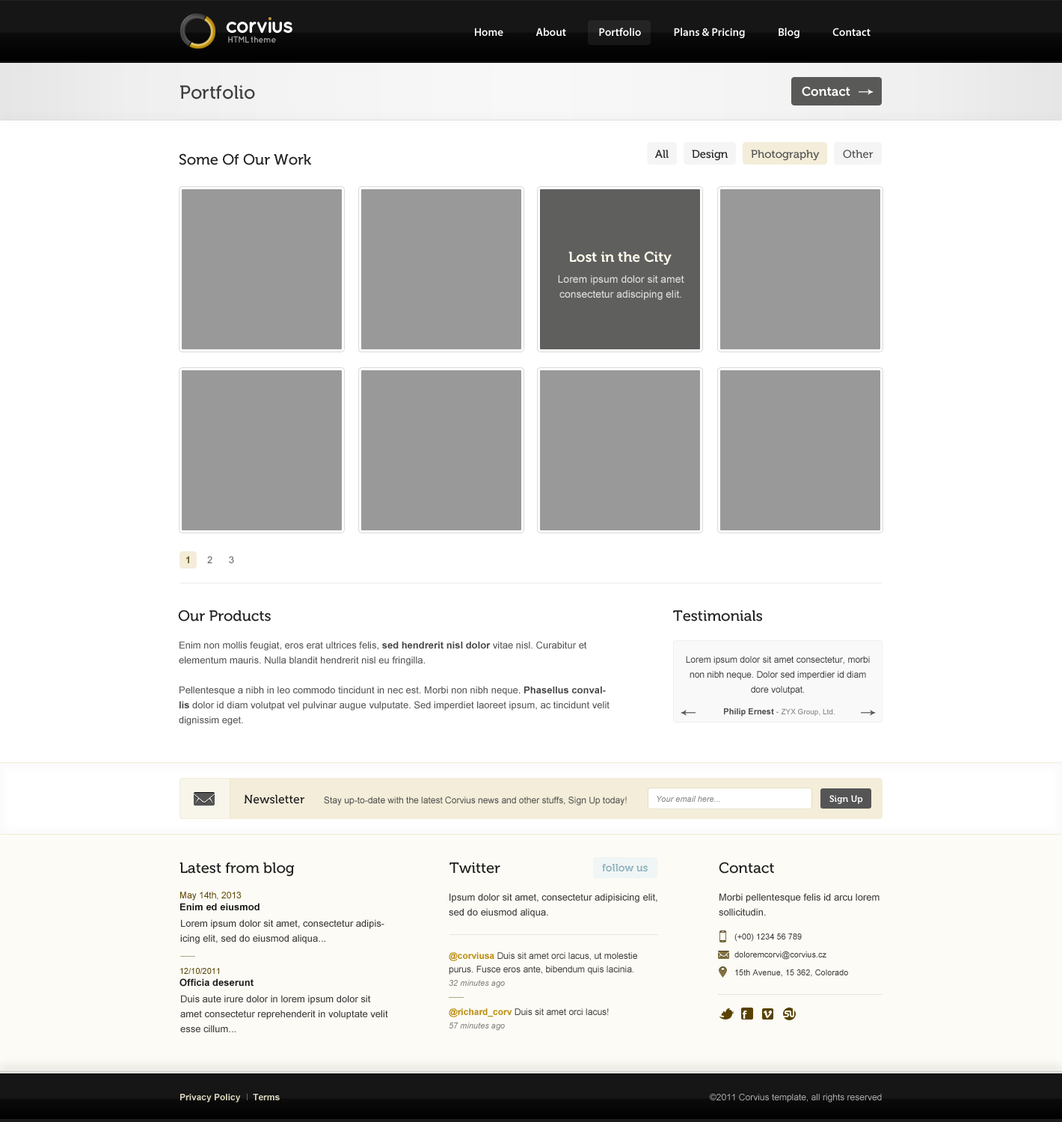
<style>
.page{position:relative;width:1062px;height:1122px;background:#ffffff}
.page>*{position:absolute;margin:0}
.t1{font:11.2px "MyriadPro-Semibold";color:#fefefe}
.t2{font:9px "QuicksandBold-Regular";letter-spacing:-0.07em;color:#a0a0a0}
.t3{font:9px "QuicksandBold-Regular";letter-spacing:-0.1em;color:#a0a0a0;text-transform:uppercase}
.t4{font:18.7px "Museo-500";color:#3f3f3f}
.t5{font:12.7px "Museo-700";color:#ffffff}
.t6{font:11.2px "Museo-500";color:#202020}
.t7{font:11.2px "Museo-500";color:#505050}
.t8{font:15px "Museo-500";color:#202020}
.t9{font:14.2px "Museo-700";color:#fffbec}
.t10{font:10.5px/15px "ArialMT";color:#dfdfdf}
.t11{font:9.7px "ArialMT";color:#686868}
.t12{font:9.7px "Arial-BoldMT";color:#6b5a22}
.t13{font:9.7px/15px "ArialMT";color:#575757}
.t14{font:9.7px/15px "Arial-BoldMT";color:#444444}
.t15{font:9px/15px "ArialMT";color:#414141}
.t16{font:7.5px "ArialMT";color:#878787}
.t17{font:8.2px "Arial-BoldMT";color:#494949}
.t18{font:8.2px "ArialMT";color:#878787}
.t19{font:12px "Museo-500";color:#181818}
.t20{font:9px "ArialMT";color:#4c4c4c}
.t21{font:8.2px "Arial-ItalicMT";color:#868585}
.t22{font:9px "Museo-700";color:#ffffff}
.t23{font:10.5px "Museo-700";color:#99c3ce}
.t24{font:9.7px/12px "Arial-BoldMT";color:#181818}
.t25{font:9px/12px "ArialMT";color:#594200}
.t26{font:9.7px/15px "ArialMT";color:#3d3c3c}
.t27{font:8.2px "ArialMT";color:#3d3c3c}
.t28{font:9px/13.5px "ArialMT";color:#3d3c3c}
.t29{font:9px/13.5px "Arial-BoldMT";color:#bc8e14}
.t30{font:8.2px/13.5px "Arial-ItalicMT";color:#858383}
.t31{font:8.2px/12px "ArialMT";color:#594200}
.t32{font:9px "Arial-BoldMT";color:#dcd6c1}
.t33{font:9px "ArialMT";color:#b2b2b2}
</style>
<div class="page">
<p class="t1" style="left:475px;top:28px;width:396px;height:10px">Home              About              Portfolio              Plans &amp; Pricing              Blog              Contact</p>
<p class="t2" style="left:228px;top:36px;width:48px;height:7px"><span class="t3">html </span>theme</p>
<p class="t4" style="left:180px;top:85px;width:75px;height:15px">Portfolio</p>
<p class="t5" style="left:802px;top:86px;width:49px;height:11px">Contact</p>
<p class="t6" style="left:655px;top:150px;width:14px;height:8px">All</p>
<p class="t6" style="left:692px;top:150px;width:36px;height:11px">Design</p>
<p class="t7" style="left:751px;top:150px;width:69px;height:11px">Photography</p>
<p class="t7" style="left:843px;top:150px;width:31px;height:9px">Other</p>
<p class="t8" style="left:179px;top:153px;width:132px;height:12px">Some Of Our Work</p>
<p class="t9" style="left:569px;top:251px;width:103px;height:14px">Lost in the City</p>
<p class="t10" style="left:558px;top:275px;width:127px;height:25px;text-align:center">Lorem ipsum dolor sit amet consectetur adisciping elit.</p>
<p class="t11" style="left:186px;top:556px;width:48px;height:7px"><span class="t12">1</span>      2      3</p>
<p class="t8" style="left:178px;top:610px;width:93px;height:12px">Our Products</p>
<p class="t8" style="left:673px;top:611px;width:89px;height:11px">Testimonials</p>
<p class="t13" style="left:179px;top:641px;width:431px;height:85px">Enim non mollis feugiat, eros erat ultrices felis, <span class="t14">sed hendrerit nisl dolor</span> vitae nisl. Curabitur et elementum mauris. Nulla blandit hendrerit nisl eu fringilla. <br><br>Pellentesque a nibh in leo commodo tincidunt in nec est. Morbi non nibh neque. <span class="t14">Phasellus convallis</span> dolor id diam volutpat vel pulvinar augue vulputate. Sed imperdiet laoreet ipsum, ac tincidunt velit dignissim eget.</p>
<p class="t15" style="left:686px;top:656px;width:184px;height:39px;text-align:center">Lorem ipsum dolor sit amet consectetur, morbi non nibh neque. Dolor sed imperdier id diam dore volutpat.</p>
<p class="t16" style="left:724px;top:709px;width:111px;height:8px"><span class="t17">Philip Ernest </span><span class="t18">- </span>ZYX Group, Ltd.</p>
<p class="t19" style="left:244px;top:795px;width:61px;height:9px">Newsletter</p>
<p class="t20" style="left:324px;top:797px;width:303px;height:9px">Stay up-to-date with the latest Corvius news and other stuffs, Sign Up today!</p>
<p class="t21" style="left:657px;top:796px;width:64px;height:6px">Your email here...</p>
<p class="t22" style="left:830px;top:795px;width:33px;height:9px">Sign Up</p>
<p class="t8" style="left:180px;top:863px;width:115px;height:14px">Latest from blog</p>
<p class="t8" style="left:450px;top:863px;width:51px;height:11px">Twitter</p>
<p class="t23" style="left:602px;top:864px;width:46px;height:8px">follow us</p>
<p class="t8" style="left:719px;top:862px;width:55px;height:12px">Contact</p>
<p class="t24" style="left:180px;top:892px;width:80px;height:19px"><span class="t25">May 14th, 2013<br></span>Enim ed eiusmod</p>
<p class="t26" style="left:449px;top:893px;width:209px;height:25px">Ipsum dolor sit amet, consectetur adipisicing elit, sed do eiusmod aliqua.</p>
<p class="t26" style="left:719px;top:893px;width:161px;height:23px">Morbi pellentesque felis id arcu lorem sollicitudin.</p>
<p class="t26" style="left:180px;top:920px;width:205px;height:24px">Lorem ipsum dolor sit amet, consectetur adipisicing elit, sed do eiusmod aliqua...</p>
<p class="t27" style="left:735px;top:934px;width:67px;height:8px">(+00) 1234 56 789</p>
<p class="t28" style="left:449px;top:952px;width:188px;height:36px"><span class="t29">@corviusa </span>Duis sit amet orci lacus, ut molestie purus. Fusce eros ante, bibendum quis lacinia.<br><span class="t30">32 minutes ago</span></p>
<p class="t27" style="left:735px;top:952px;width:92px;height:8px">doloremcorvi@corvius.cz</p>
<p class="t24" style="left:180px;top:968px;width:74px;height:19px"><span class="t31">12/10/2011<br></span>Officia deserunt</p>
<p class="t27" style="left:735px;top:970px;width:113px;height:7px">15th Avenue, 15 362, Colorado</p>
<p class="t26" style="left:180px;top:995px;width:208px;height:38px">Duis aute irure dolor in lorem ipsum dolor sit amet consectetur reprehenderit in voluptate velit esse cillum...</p>
<p class="t28" style="left:449px;top:1009px;width:160px;height:22px"><span class="t29">@richard_corv </span>Duis sit amet orci lacus!<br><span class="t30">57 minutes ago</span></p>
<p class="t32" style="left:180px;top:1094px;width:100px;height:9px">Privacy Policy     Terms</p>
<p class="t33" style="left:710px;top:1094px;width:172px;height:9px">©2011 Corvius template, all rights reserved</p>
</div>
